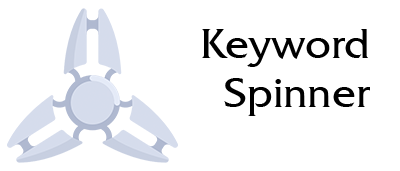
<style>
.page{position:relative;width:400px;height:171px;background:#ffffff}
.page>*{position:absolute;margin:0}
.t1{font:41px "FrizQuadrataTT";color:#000000}
</style>
<div class="page">
<p class="t1" style="left:202px;top:29px;width:168px;height:87px;text-align:right">Keyword<br>Spinner</p>
</div>
